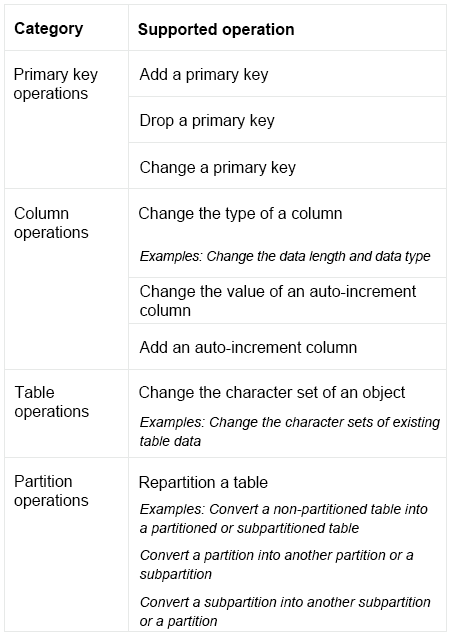
<style>
.page{position:relative;width:451px;height:635px;background:#ffffff}
.page>*{position:absolute;margin:0}
.t1{font:16px "Arial-BoldMT";color:#000000}
.t2{font:16px/19px "ArialMT";color:#000000}
.t3{font:16px "ArialMT";color:#000000}
.t4{font:14px "Arial-ItalicMT";letter-spacing:-0.02em;color:#000000}
.t5{font:14px/19px "Arial-ItalicMT";color:#000000}
</style>
<div class="page">
<p class="t1" style="left:14px;top:22px;width:70px;height:15px">Category</p>
<p class="t1" style="left:138px;top:23px;width:156px;height:15px">Supported operation</p>
<p class="t2" style="left:13px;top:68px;width:85px;height:34px">Primary key <br>operations</p>
<p class="t2" style="left:139px;top:68px;width:157px;height:108px">Add a primary key<br>Drop a primary key<br>Change a primary key</p>
<p class="t2" style="left:14px;top:207px;width:75px;height:34px">Column operations</p>
<p class="t3" style="left:139px;top:207px;width:203px;height:15px">Change the type of a column</p>
<p class="t4" style="left:140px;top:251px;width:291px;height:13px">Examples: Change the data length and data type</p>
<p class="t2" style="left:140px;top:285px;width:277px;height:31px">Change the value of an auto-increment column</p>
<p class="t3" style="left:139px;top:341px;width:218px;height:12px">Add an auto-increment column</p>
<p class="t2" style="left:14px;top:386px;width:75px;height:34px">Table operations</p>
<p class="t3" style="left:139px;top:386px;width:267px;height:15px">Change the character set of an object</p>
<p class="t5" style="left:140px;top:417px;width:300px;height:29px">Examples: Change the character sets of existing table data</p>
<p class="t2" style="left:14px;top:475px;width:75px;height:34px">Partition operations</p>
<p class="t3" style="left:139px;top:476px;width:129px;height:15px">Repartition a table</p>
<p class="t5" style="left:139px;top:504px;width:292px;height:125px">Examples: Convert a non-partitioned table into a partitioned or subpartitioned table<br>Convert a partition into another partition or a subpartition<br>Convert a subpartition into another subpartition or a partition</p>
</div>
